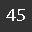
<style>
.page{position:relative;width:32px;height:32px;background:#333333}
.page>*{position:absolute;margin:0}
.t1{font:17.8px "MyriadPro-Regular";color:#ffffff;scale:1.12 1}
</style>
<div class="page">
<p class="t1" style="left:6px;top:9px;width:19px;height:12px">45</p>
</div>
